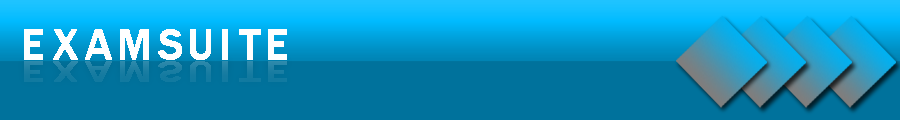
<style>
.page{position:relative;width:900px;height:120px;background:#00729c}
.page>*{position:absolute;margin:0}
.t1{font:44.2px "FranklinGothic-Medium";letter-spacing:0.1em;color:#ffffff;font-variant:small-caps;font-weight:bold}
.t2{font:29.5px "FranklinGothic-Medium";letter-spacing:0.1em;color:#1a7da2;font-variant:small-caps;font-weight:bold;scale:1.47 1}
</style>
<div class="page">
<p class="t1" style="left:24px;top:29px;width:263px;height:31px">EXAMSUITE</p>
<p class="t2" style="left:24px;top:61px;width:263px;height:21px">EXAMSUITE</p>
</div>
